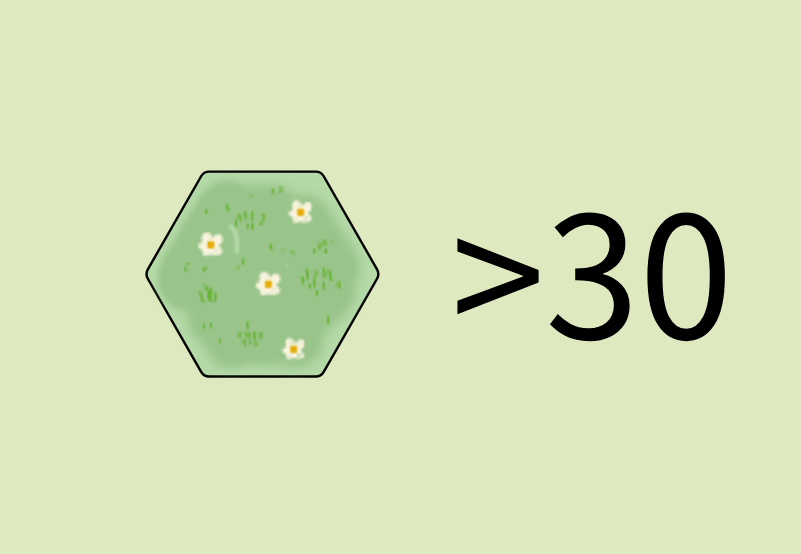
<style>
.page{position:relative;width:801px;height:554px;background:#dfe9bf}
.page>*{position:absolute;margin:0}
.t1{font:169.5px "DejaVuSans";color:#000000}
</style>
<div class="page">
<p class="t1" style="left:457px;top:212px;width:268px;height:130px">&gt;30</p>
</div>
